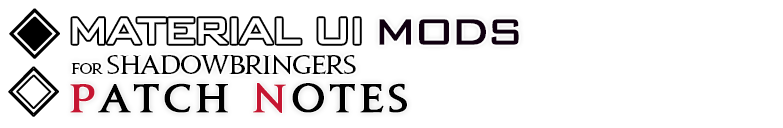
<style>
.page{position:relative;width:783px;height:128px;background:#ffffff}
.page>*{position:absolute;margin:0}
.t1{font:55px "Gulim";letter-spacing:-0.1em;color:#000000;font-weight:bold}
.t2{font:48px "BankGothic";letter-spacing:-0.1em;color:#ffffff;font-weight:bold}
.t3{font:48px "BankGothic";letter-spacing:-0.1em;color:#100010;font-weight:bold}
.t4{font:48px "BankGothic";letter-spacing:-0.1em;color:#c71632;font-weight:bold}
.t5{font:24px "JupiterPro-Bold";letter-spacing:-0.05em;color:#000000}
.t6{font:14px "JupiterPro-Bold";letter-spacing:-0.05em;color:#000000}
.t7{font:55px "Gulim";letter-spacing:-0.1em;font-weight:bold}
.t8{font:36px "JupiterPro-Bold";letter-spacing:0.1em;color:#000000;font-weight:bold}
.t9{font:36px "JupiterPro-Bold";letter-spacing:0.1em;color:#c61632;font-weight:bold}
</style>
<div class="page">
<p class="t1" style="left:9px;top:8px;width:51px;height:51px">◈</p>
<p class="t2" style="left:72px;top:18px;width:288px;height:26px">MATERIAL UI</p>
<p class="t3" style="left:379px;top:19px;width:140px;height:26px"><span class="t4">                     </span>MODS</p>
<p class="t5" style="left:71px;top:55px;width:285px;height:20px"><span class="t6">for </span>shadowbringers</p>
<p class="t7" style="left:8px;top:66px;width:51px;height:51px">◈</p>
<p class="t8" style="left:70px;top:83px;width:337px;height:30px"><span class="t9">P</span>ATCH <span class="t9">N</span>OTES</p>
</div>
